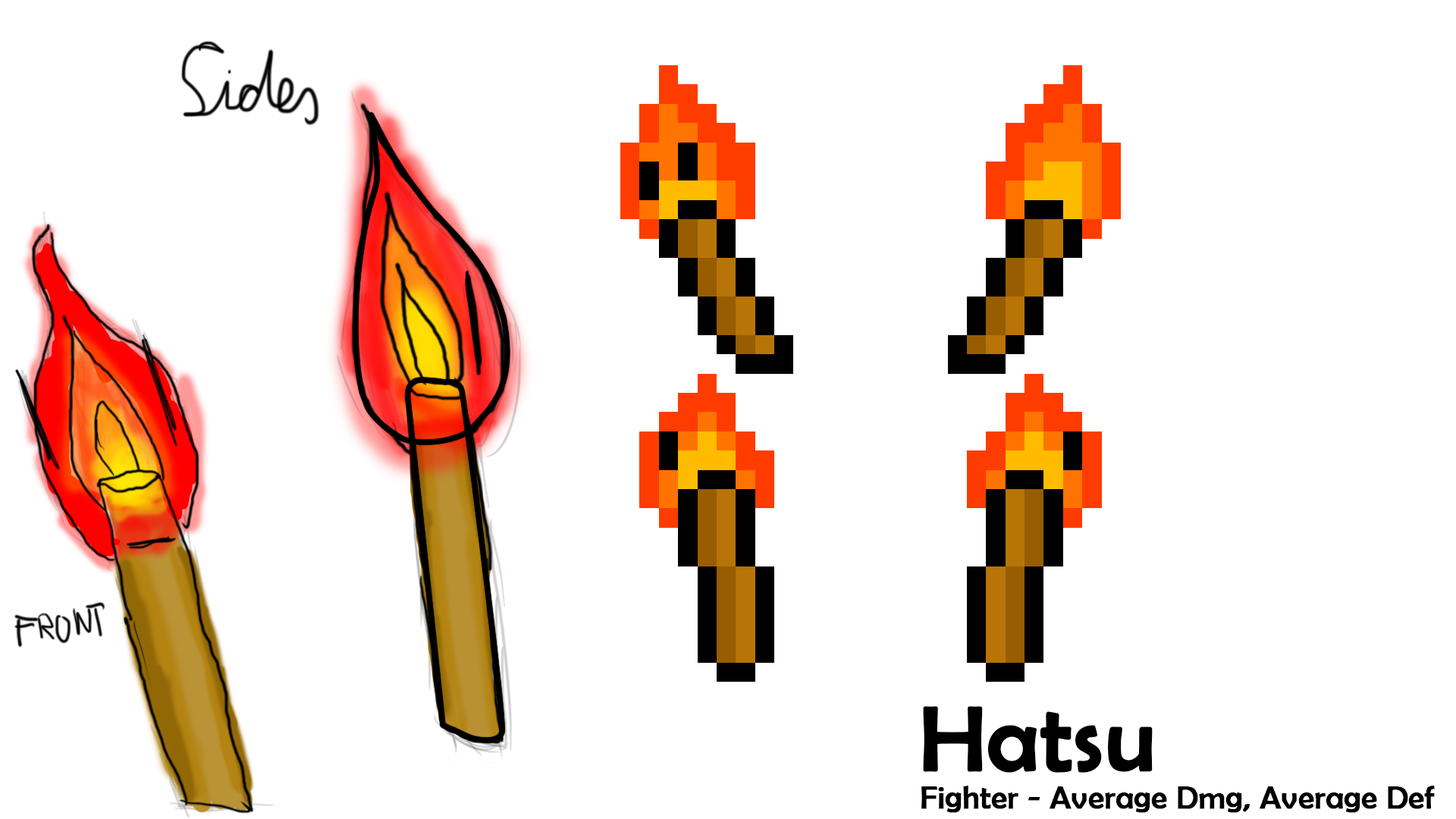
<style>
.page{position:relative;width:1456px;height:819px;background:#ffffff}
.page>*{position:absolute;margin:0}
.t1{font:31.6px "BerlinSansFB-Reg";color:#000000;font-weight:bold}
.t2{font:91.7px "BerlinSansFB-Reg";color:#000000;font-weight:bold}
</style>
<div class="page">
<p class="t1" style="left:921px;top:706px;width:514px;height:107px"><span class="t2">Hatsu<br></span>Fighter - Average Dmg, Average Def</p>
</div>
